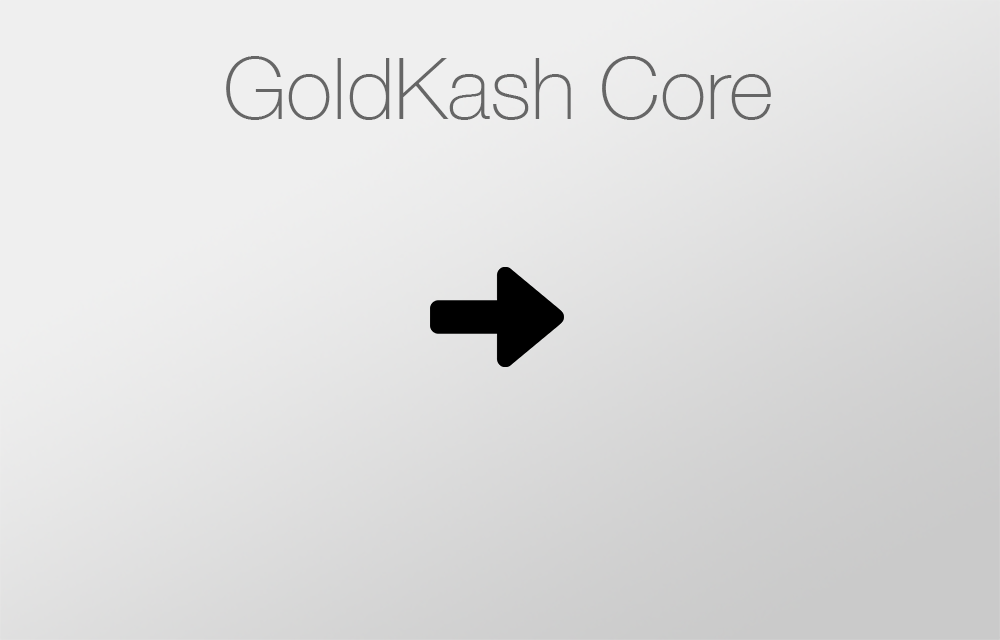
<style>
.page{position:relative;width:1000px;height:640px}
.page>*{position:absolute;margin:0}
.t1{font:85.7px "HelveticaNeue-Thin";color:#666666}
</style>
<div class="page">
<p class="t1" style="left:226px;top:56px;width:545px;height:64px">GoldKash Core</p>
</div>
